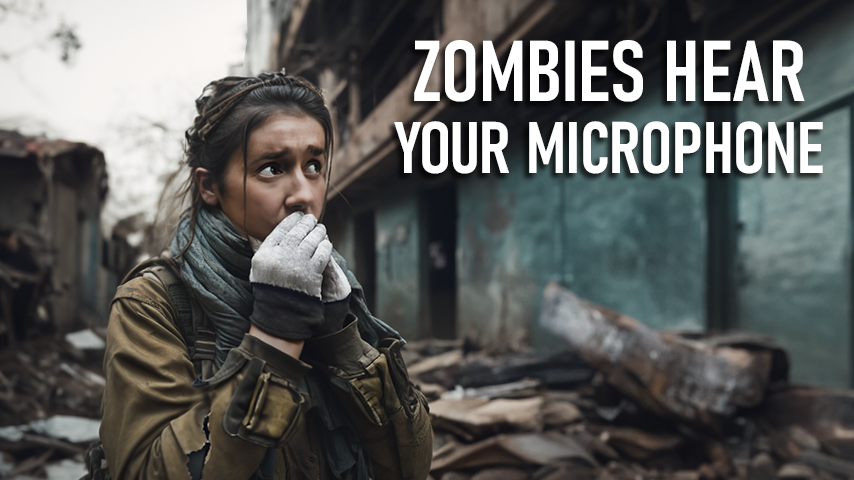
<style>
.page{position:relative;width:854px;height:480px}
.page>*{position:absolute;margin:0}
.t1{font:72px/72px "Bahnschrift-SemiBoldCondensed";color:#ffffff;text-transform:uppercase;font-weight:bold}
.t2{font:85px/72px "Bahnschrift-SemiBoldCondensed";color:#ffffff;text-transform:uppercase;font-weight:bold}
</style>
<div class="page">
<p class="t1" style="left:394px;top:40px;width:429px;height:134px;text-align:center"><span class="t2">Zombies Hear <br></span>Your Microphone</p>
</div>
